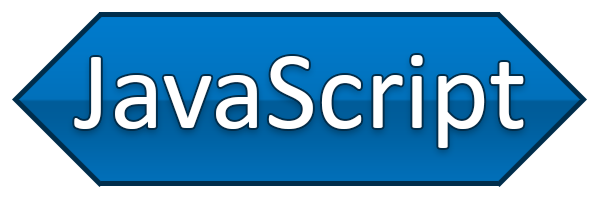
<style>
.page{position:relative;width:600px;height:200px;background:#ffffff}
.page>*{position:absolute;margin:0}
.t1{font:112.8px "Calibri";color:#ffffff}
</style>
<div class="page">
<p class="t1" style="left:74px;top:55px;width:450px;height:93px">JavaScript</p>
</div>
